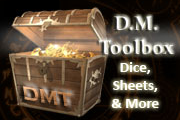
<style>
.page{position:relative;width:180px;height:120px}
.page>*{position:absolute;margin:0}
.t1{font:19.8px "Constantia-Bold"}
.t2{font:15px "Calibri-Bold"}
.t3{font:20.4px "CopperplateGothic-Bold"}
</style>
<div class="page">
<p class="t1" style="left:98px;top:15px;width:76px;height:39px;text-align:center">D.M.<br>Toolbox</p>
<p class="t2" style="left:111px;top:61px;width:48px;height:46px;text-align:center">Dice,<br>Sheets, <br>&amp; More</p>
<p class="t3" style="left:22px;top:84px;width:49px;height:22px;rotate:10deg">DMT</p>
</div>
